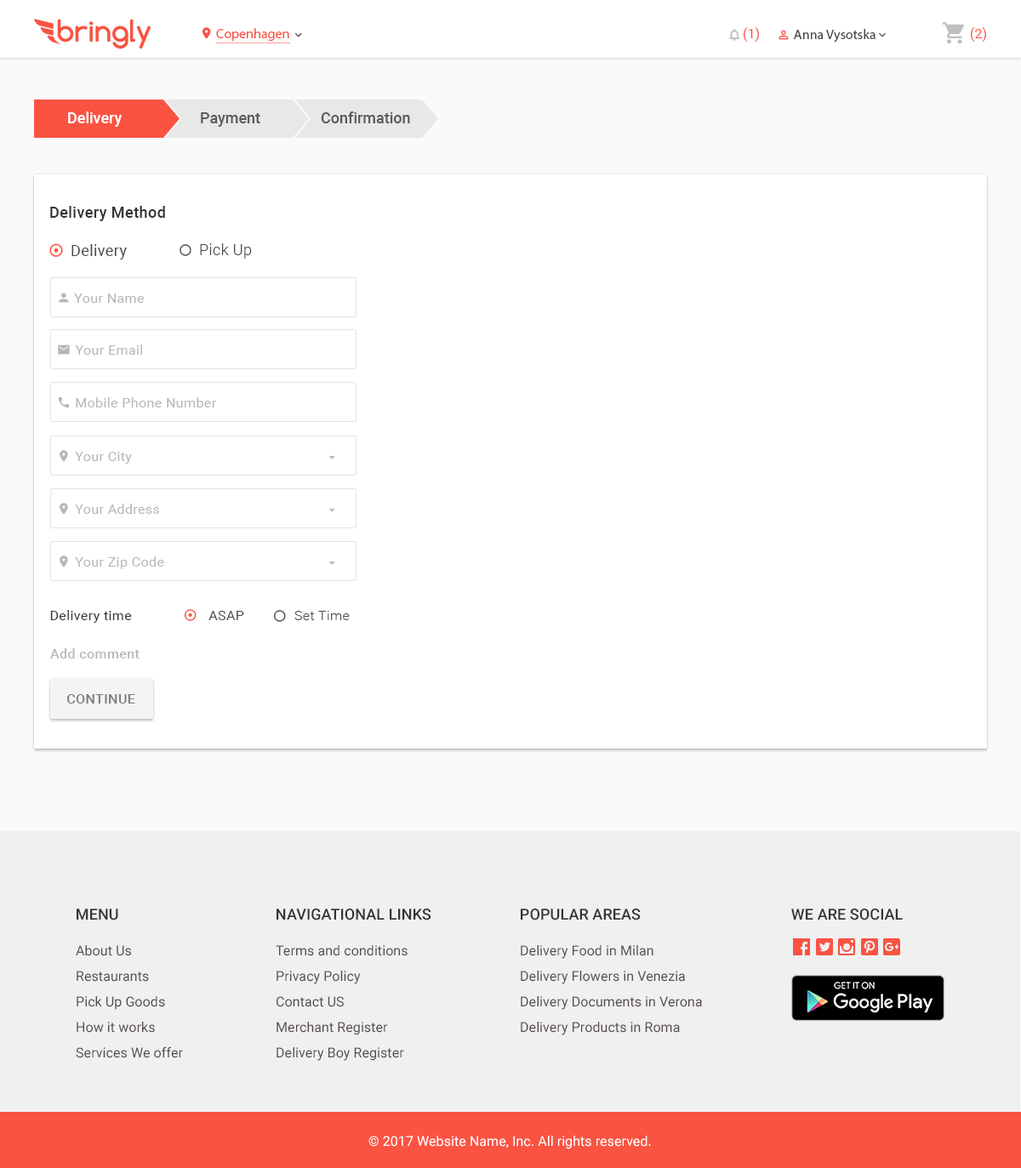
<style>
.page{position:relative;width:1021px;height:1168px;background:#ffffff}
.page>*{position:absolute;margin:0}
.t1{font:13.6px "MyriadPro-Regular";color:#fa5342}
.t2{font:13.6px "Roboto-Regular";color:#fa5342}
.t3{font:13.6px "MyriadPro-Regular";color:#4a4a4a}
.t4{font:15.3px "Roboto-Medium";color:#fffefe}
.t5{font:15.3px "Roboto-Medium";color:#5c5c5c}
.t6{font:15.3px "Roboto-Medium";letter-spacing:0.025em;color:#333333}
.t7{font:15.3px "Roboto-Regular";letter-spacing:0.025em;color:#4a4a4a}
.t8{font:15.3px "Roboto-Light";letter-spacing:0.025em;color:#4a4a4a}
.t9{font:13.6px "Roboto-Regular";letter-spacing:0.025em;color:#b6b6b6}
.t10{font:13.6px "Roboto-Regular";letter-spacing:0.025em;color:#333333}
.t11{font:13.6px "Roboto-Regular";letter-spacing:0.025em;color:#4a4a4a;text-transform:uppercase}
.t12{font:13.6px "Roboto-Light";letter-spacing:0.025em;color:#4a4a4a}
.t13{font:13.6px "Roboto-Medium";letter-spacing:0.025em;color:#b8b8b8}
.t14{font:13.6px "Roboto-Medium";letter-spacing:0.025em;color:#7d7d7d;text-transform:uppercase}
.t15{font:15.3px "Roboto-Medium";letter-spacing:0.005em;color:#333333}
.t16{font:15.3px "Roboto-Medium";letter-spacing:0.005em;color:#333333;text-transform:uppercase}
.t17{font:13.6px/25.5px "Roboto-Regular";letter-spacing:0.005em;color:#554c4a}
.t18{font:13.6px "Roboto-Regular";letter-spacing:0.005em;color:#ffffff}
</style>
<div class="page">
<p class="t1" style="left:216px;top:28px;width:73px;height:13px">Copenhagen</p>
<p class="t2" style="left:743px;top:27px;width:16px;height:15px">(1)</p>
<p class="t3" style="left:794px;top:29px;width:81px;height:14px">Anna Vysotska</p>
<p class="t2" style="left:970px;top:27px;width:16px;height:15px">(2)</p>
<p class="t4" style="left:68px;top:111px;width:55px;height:16px">Delivery</p>
<p class="t5" style="left:201px;top:112px;width:59px;height:15px">Payment</p>
<p class="t5" style="left:321px;top:111px;width:89px;height:12px">Confirmation</p>
<p class="t6" style="left:50px;top:206px;width:115px;height:15px">Delivery Method</p>
<p class="t7" style="left:71px;top:244px;width:56px;height:15px">Delivery</p>
<p class="t8" style="left:200px;top:243px;width:52px;height:16px">Pick Up</p>
<p class="t9" style="left:74px;top:294px;width:70px;height:9px">Your Name</p>
<p class="t9" style="left:75px;top:345px;width:67px;height:10px">Your Email</p>
<p class="t9" style="left:76px;top:397px;width:141px;height:10px">Mobile Phone Number</p>
<p class="t9" style="left:75px;top:452px;width:57px;height:12px">Your City</p>
<p class="t9" style="left:75px;top:504px;width:84px;height:10px">Your Address</p>
<p class="t9" style="left:75px;top:556px;width:89px;height:13px">Your Zip Code</p>
<p class="t10" style="left:50px;top:610px;width:82px;height:13px">Delivery time</p>
<p class="t11" style="left:208px;top:611px;width:36px;height:9px">asap</p>
<p class="t12" style="left:294px;top:611px;width:56px;height:9px">Set Time</p>
<p class="t13" style="left:50px;top:648px;width:90px;height:10px">Add comment</p>
<p class="t14" style="left:66px;top:694px;width:69px;height:10px">COntinue</p>
<p class="t15" style="left:77px;top:909px;width:41px;height:11px">MENU</p>
<p class="t16" style="left:276px;top:909px;width:155px;height:11px">Navigational Links</p>
<p class="t16" style="left:521px;top:909px;width:120px;height:11px">Popular Areas</p>
<p class="t16" style="left:791px;top:909px;width:112px;height:11px">We are social</p>
<p class="t17" style="left:76px;top:945px;width:107px;height:113px">About Us<br>Restaurants<br>Pick Up Goods <br>How it works <br>Services We offer</p>
<p class="t17" style="left:276px;top:945px;width:131px;height:116px">Terms and conditions<br>Privacy Policy<br>Contact US <br>Merchant Register <br>Delivery Boy Register</p>
<p class="t17" style="left:521px;top:945px;width:181px;height:90px">Delivery Food in Milan<br>Delivery Flowers in Venezia<br>Delivery Documents in Verona<br>Delivery Products in Roma</p>
<p class="t18" style="left:368px;top:1136px;width:283px;height:13px">© 2017 Website Name, Inc. All rights reserved.</p>
</div>
